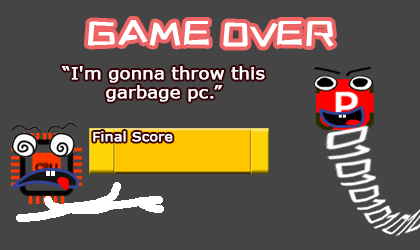
<style>
.page{position:relative;width:420px;height:250px;background:#454545}
.page>*{position:absolute;margin:0}
.t1{font:35.1px "ZCOOLKuaiLe-Regular";color:#ffffff;font-weight:bold;scale:1.09 1}
.t2{font:15.9px "Verdana";color:#ffffff;font-weight:bold;scale:1.11 1}
.t3{font:12.5px "Verdana";color:#ffffff;font-weight:bold;scale:1.11 1}
</style>
<div class="page">
<p class="t1" style="left:87px;top:20px;width:247px;height:27px">GAME OVER</p>
<p class="t2" style="left:61px;top:66px;width:204px;height:36px;text-align:center">“I'm gonna throw this garbage pc.”</p>
<p class="t3" style="left:93px;top:131px;width:80px;height:11px">Final Score</p>
</div>
